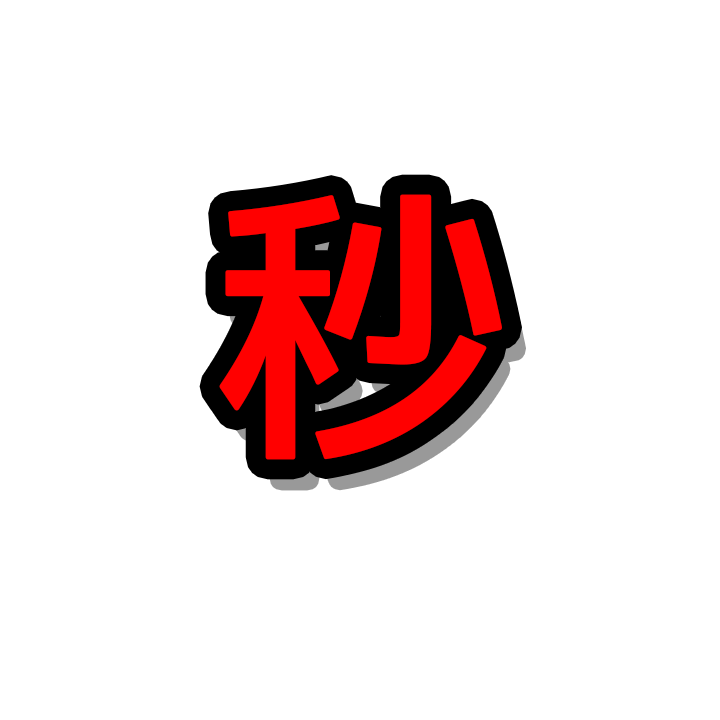
<style>
.page{position:relative;width:720px;height:720px;background:#ffffff}
.page>*{position:absolute;margin:0}
.t1{font:300px "07YasashisaAntique";color:#ff0000}
</style>
<div class="page">
<p class="t1" style="left:219px;top:194px;width:283px;height:266px">秒</p>
</div>
